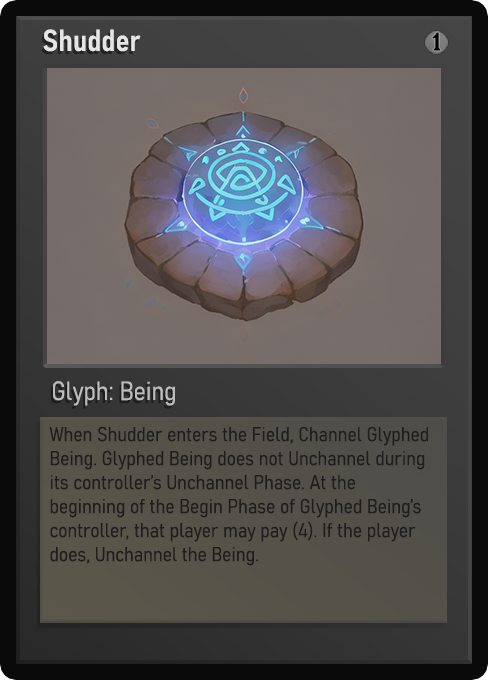
<style>
.page{position:relative;width:488px;height:680px}
.page>*{position:absolute;margin:0}
.t1{font:30px "Bahnschrift-SemiBoldSemiCondensed";color:#f2f2f2;font-weight:bold}
.t2{font:25px "WTRRoycroft";color:#000000;font-weight:bold;scale:1.09 1}
.t3{font:26px "Bahnschrift-LightSemiCondensed";color:#c8c8c8;font-weight:bold}
.t4{font:20px "Bahnschrift-LightSemiCondensed";color:#1e1e1e;font-weight:bold}
</style>
<div class="page">
<p class="t1" style="left:43px;top:29px;width:98px;height:23px;opacity:0.9">Shudder</p>
<p class="t2" style="left:432px;top:32px;width:9px;height:19px">1</p>
<p class="t3" style="left:53px;top:381px;width:122px;height:25px;opacity:0.9">Glyph: Being</p>
<p class="t4" style="left:49px;top:426px;width:379px;height:140px">When Shudder enters the Field, Channel Glyphed Being. Glyphed Being does not Unchannel during its controller’s Unchannel Phase. At the beginning of the Begin Phase of Glyphed Being’s controller, that player may pay (4). If the player does, Unchannel the Being.</p>
</div>
